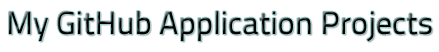
<style>
.page{position:relative;width:439px;height:52px;background:#ffffff}
.page>*{position:absolute;margin:0}
.t1{font:32px "TitilliumText22L-Regular";color:#000000}
</style>
<div class="page">
<p class="t1" style="left:9px;top:11px;width:423px;height:31px">My GitHub Application Projects</p>
</div>
